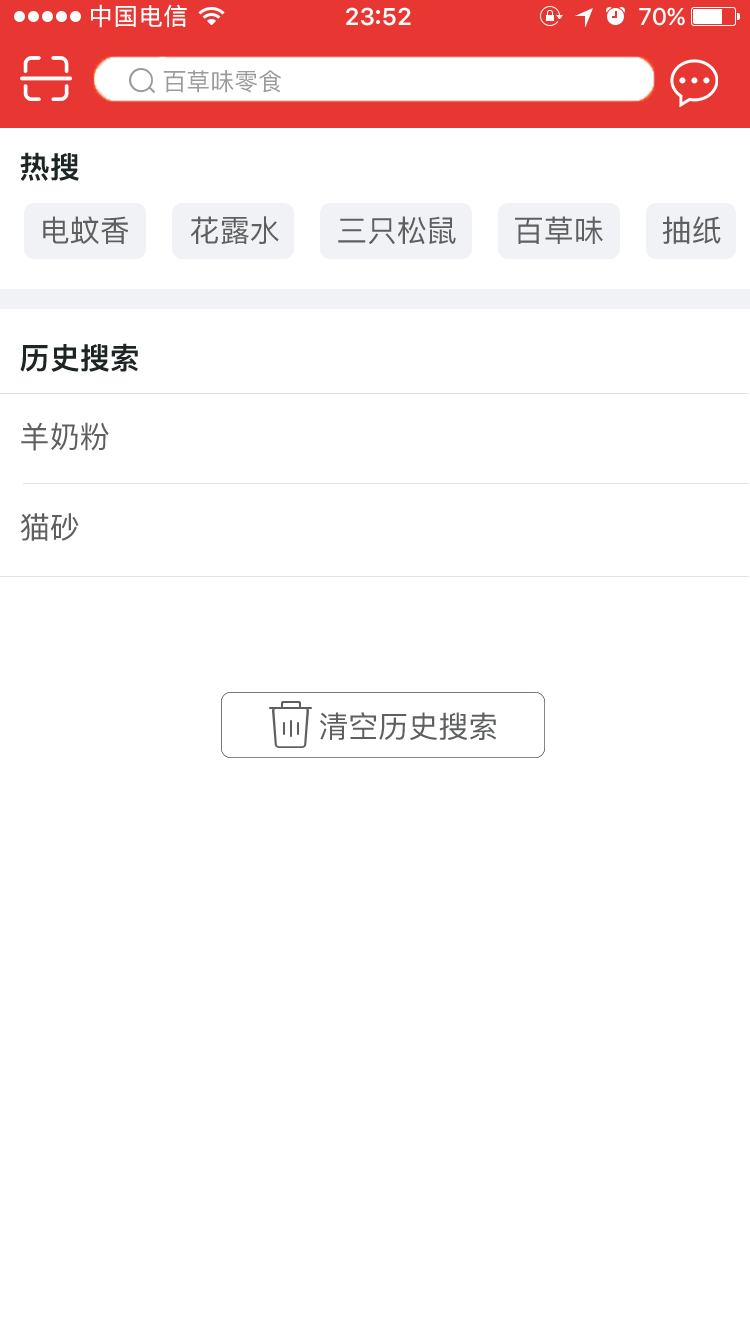
<style>
.page{position:relative;width:750px;height:1334px;background:#ffffff}
.page>*{position:absolute;margin:0}
.t1{font:30px "PingFang-SC-Heavy";color:#1e2625}
.t2{font:30px "PingFang-SC-Medium";color:#5e6060}
</style>
<div class="page">
<p class="t1" style="left:20px;top:152px;width:59px;height:29px">热搜</p>
<p class="t2" style="left:43px;top:216px;width:86px;height:28px">电蚊香</p>
<p class="t2" style="left:191px;top:216px;width:88px;height:28px">花露水</p>
<p class="t2" style="left:338px;top:216px;width:118px;height:29px">三只松鼠</p>
<p class="t2" style="left:515px;top:216px;width:88px;height:28px">百草味</p>
<p class="t2" style="left:662px;top:216px;width:59px;height:28px">抽纸</p>
<p class="t1" style="left:20px;top:343px;width:118px;height:29px">历史搜索</p>
<p class="t2" style="left:21px;top:422px;width:88px;height:29px">羊奶粉</p>
<p class="t2" style="left:20px;top:513px;width:59px;height:28px">猫砂</p>
<p class="t2" style="left:320px;top:712px;width:176px;height:28px">清空历史搜索</p>
</div>
